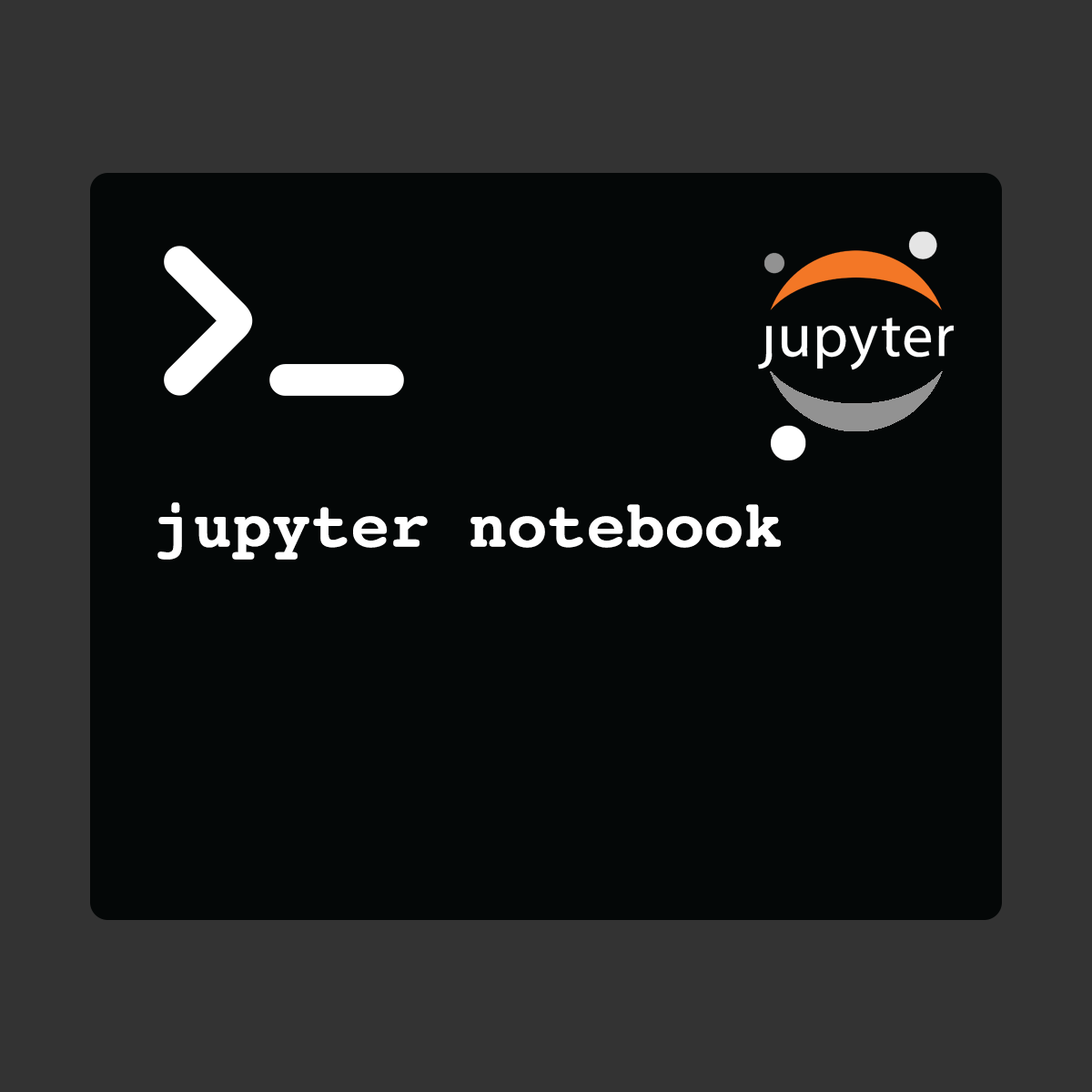
<style>
.page{position:relative;width:1092px;height:1092px;background:#040707}
.page>*{position:absolute;margin:0}
.t1{font:65.5px "Courier-Bold";color:#ffffff}
</style>
<div class="page">
<p class="t1" style="left:157px;top:502px;width:624px;height:58px">jupyter notebook</p>
</div>
